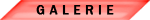
<style>
.page{position:relative;width:150px;height:20px}
.page>*{position:absolute;margin:0}
.t1{font:13px "FranklinGothic-Medium";letter-spacing:0.34em;color:#000000;text-transform:uppercase;font-weight:bold}
</style>
<div class="page">
<p class="t1" style="left:36px;top:5px;width:78px;height:10px">galerie</p>
</div>
